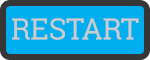
<style>
.page{position:relative;width:150px;height:60px;background:#00aeef}
.page>*{position:absolute;margin:0}
.t1{font:29.6px "RobotoSlab-Regular";letter-spacing:-0.01em;color:#cccccc}
</style>
<div class="page">
<p class="t1" style="left:12px;top:18px;width:127px;height:22px">RESTART</p>
</div>
